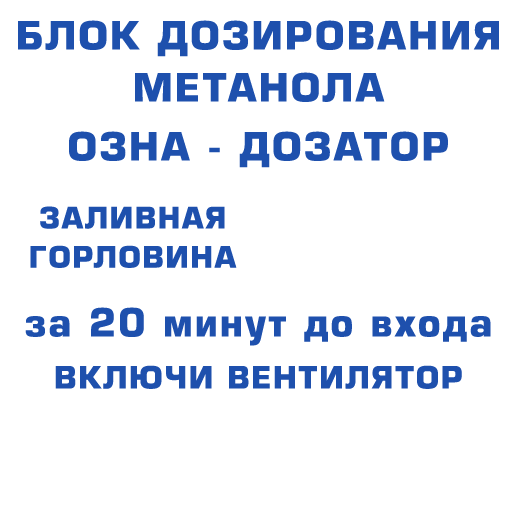
<style>
.page{position:relative;width:512px;height:512px;background:#ffffff}
.page>*{position:absolute;margin:0}
.t1{font:38px/52px "Europe-Bold";letter-spacing:0.05em;color:#1e50ad}
.t2{font:38px "Europe-Bold";letter-spacing:0.05em;color:#1e50ad}
.t3{font:28.6px/39.2px "Europe-Bold";letter-spacing:0.05em;color:#1e50ad}
.t4{font:30px/52px "Europe-Bold";letter-spacing:0.05em;color:#1e50ad}
</style>
<div class="page">
<p class="t1" style="left:18px;top:20px;width:481px;height:82px;text-align:center">БЛОК ДОЗИРОВАНИЯ МЕТАНОЛА</p>
<p class="t2" style="left:69px;top:131px;width:379px;height:37px">ОЗНА - ДОЗАТОР</p>
<p class="t3" style="left:30px;top:206px;width:207px;height:62px;text-align:center">ЗАЛИВНАЯ<br>ГОРЛОВИНА</p>
<p class="t1" style="left:25px;top:307px;width:466px;height:82px;text-align:center">за 20 минут до входа<span class="t4"><br>ВКЛЮЧИ ВЕНТИЛЯТОР</span></p>
</div>
